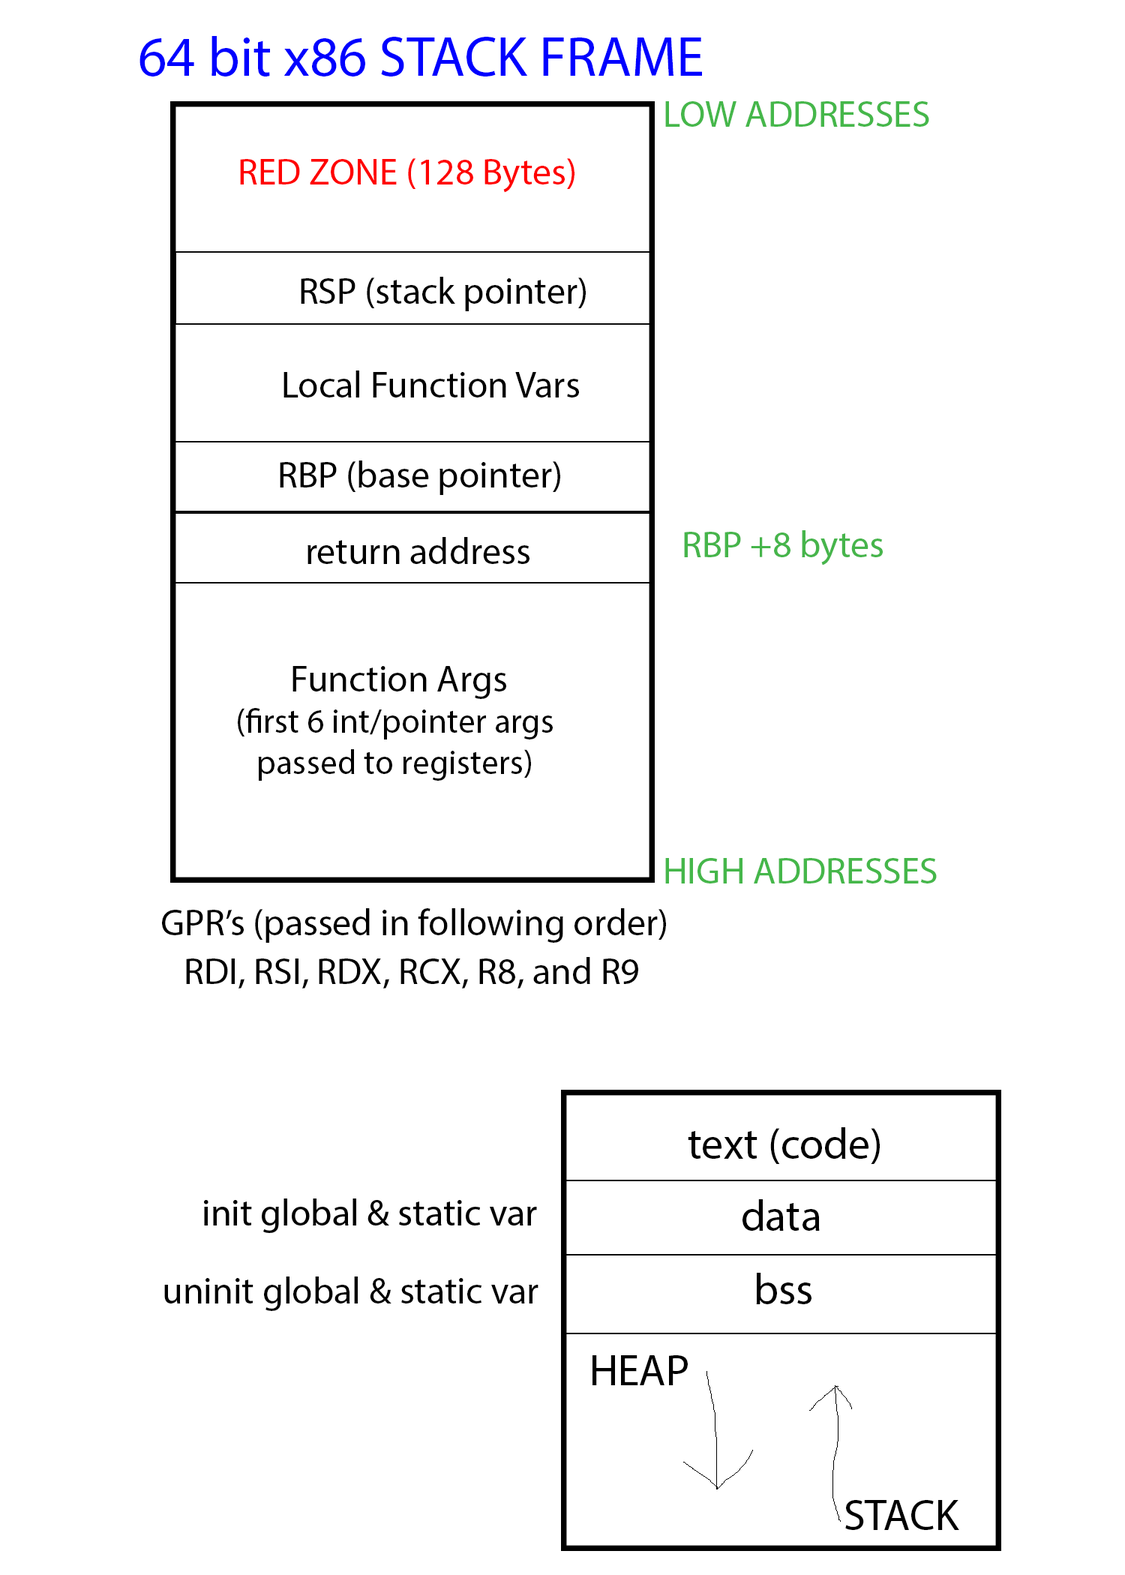
<style>
.page{position:relative;width:1125px;height:1575px;background:#ffffff}
.page>*{position:absolute;margin:0}
.t1{font:56.2px "MyriadPro-Regular";color:#0000ff}
.t2{font:9px "MyriadPro-Regular";color:#45b74a}
.t3{font:9px "MyriadPro-Regular";color:#ff0000}
.t4{font:9px "MyriadPro-Regular";color:#000000}
.t5{font:37.5px "MyriadPro-Regular";color:#000000}
.t6{font:9px "MyriadPro-Regular";color:#46b54b}
.t7{font:34.4px "MyriadPro-Regular";color:#000000}
.t8{font:43.7px "MyriadPro-Regular";color:#000000}
</style>
<div class="page">
<p class="t1" style="left:140px;top:36px;width:562px;height:40px">64 bit x86 STACK FRAME</p>
<p class="t2" style="left:665px;top:101px;width:264px;height:26px;text-align:center">LOW ADDRESSES</p>
<p class="t3" style="left:240px;top:158px;width:334px;height:35px;text-align:center">RED ZONE (128 Bytes)</p>
<p class="t4" style="left:301px;top:277px;width:285px;height:34px">RSP (stack pointer)</p>
<p class="t4" style="left:284px;top:370px;width:295px;height:28px">Local Function Vars</p>
<p class="t5" style="left:280px;top:460px;width:280px;height:35px">RBP (base pointer)</p>
<p class="t6" style="left:684px;top:530px;width:199px;height:36px">RBP +8 bytes</p>
<p class="t4" style="left:308px;top:537px;width:222px;height:27px">return address</p>
<p class="t7" style="left:238px;top:666px;width:315px;height:115px;text-align:center"><span class="t4"> Function Args<br></span>(first 6 int/pointer args<br>passed to registers)</p>
<p class="t2" style="left:665px;top:858px;width:272px;height:26px;text-align:center">HIGH ADDRESSES</p>
<p class="t4" style="left:162px;top:908px;width:504px;height:35px;text-align:center">GPR’s (passed in following order)</p>
<p class="t4" style="left:186px;top:957px;width:452px;height:31px;text-align:center">RDI, RSI, RDX, RCX, R8, and R9</p>
<p class="t8" style="left:688px;top:1127px;width:192px;height:37px">text (code)</p>
<p class="t8" style="left:742px;top:1199px;width:78px;height:32px">data</p>
<p class="t4" style="left:164px;top:1276px;width:374px;height:35px">uninit global &amp; static var</p>
<p class="t8" style="left:756px;top:1273px;width:56px;height:31px">bss</p>
<p class="t8" style="left:592px;top:1355px;width:96px;height:30px">HEAP</p>
<p class="t8" style="left:845px;top:1500px;width:114px;height:30px">STACK</p>
</div>
